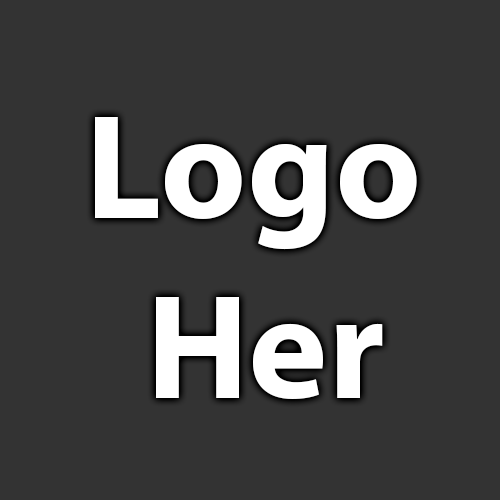
<style>
.page{position:relative;width:500px;height:500px;background:#333333}
.page>*{position:absolute;margin:0}
.t1{font:150px "MyriadPro-Bold";color:#ffffff}
</style>
<div class="page">
<p class="t1" style="left:95px;top:117px;width:322px;height:282px">Logo<br>  Her</p>
</div>
